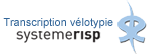
<style>
.page{position:relative;width:150px;height:54px;background:#ffffff}
.page>*{position:absolute;margin:0}
.t1{font:11px "ArialMT";color:#336699}
</style>
<div class="page">
<p class="t1" style="left:3px;top:17px;width:110px;height:12px">Transcription vélotypie</p>
</div>
